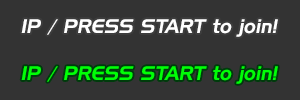
<style>
.page{position:relative;width:300px;height:100px;background:#333333}
.page>*{position:absolute;margin:0}
.t1{font:19px "HandelGothicBT-Regular";color:#ffffff;font-style:italic}
.t2{font:19px "HandelGothicBT-Regular";color:#00ff06;font-style:italic}
</style>
<div class="page">
<p class="t1" style="left:21px;top:19px;width:257px;height:18px">1P / PRESS START to join!</p>
<p class="t2" style="left:21px;top:66px;width:257px;height:18px">1P / PRESS START to join!</p>
</div>
